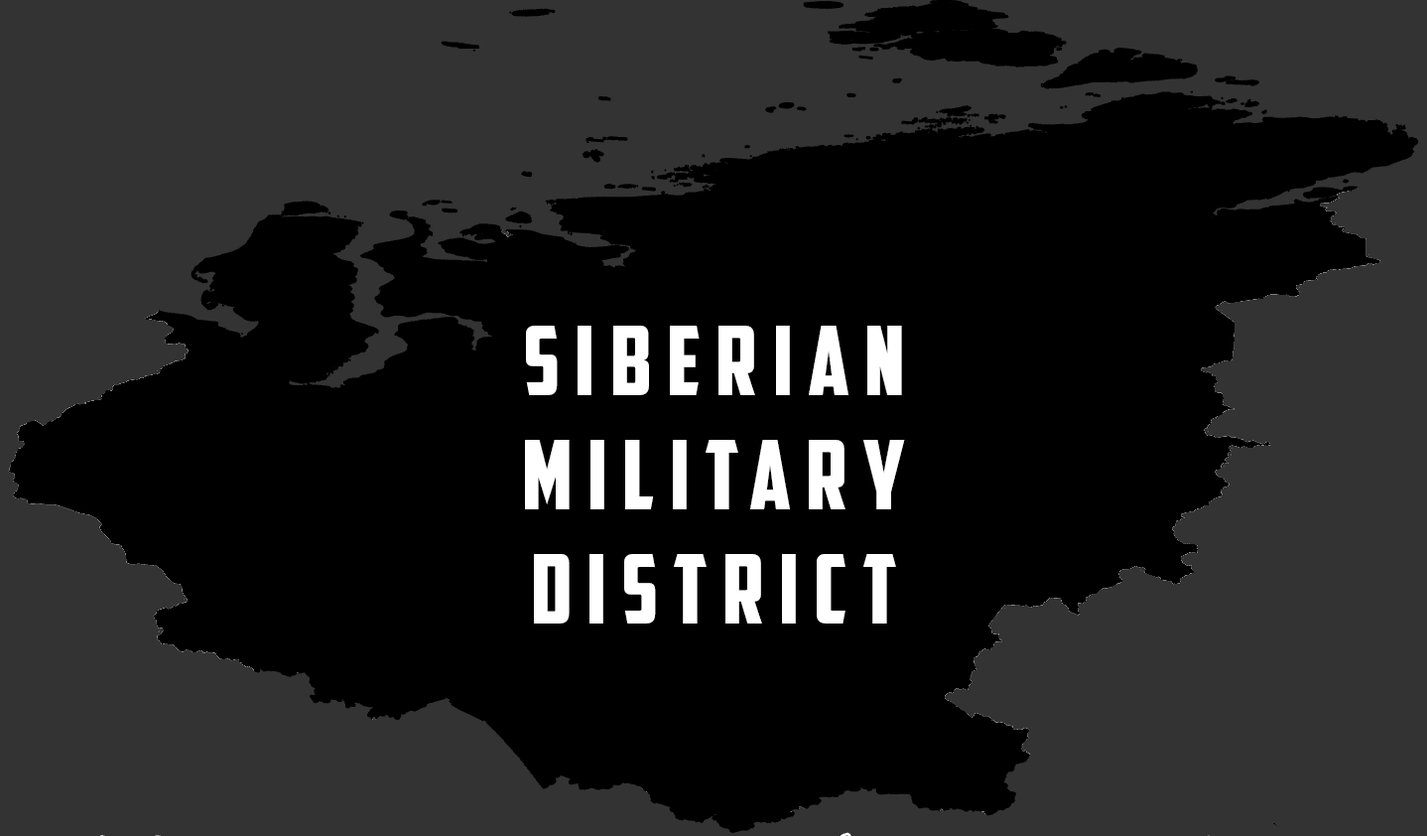
<style>
.page{position:relative;width:1427px;height:836px;background:#000000}
.page>*{position:absolute;margin:0}
.t1{font:95.3px "AmericanCaptain";letter-spacing:0.16em;color:#ffffff}
</style>
<div class="page">
<p class="t1" style="left:525px;top:326px;width:380px;height:297px;text-align:center">siberian<br>military<br>district</p>
</div>
